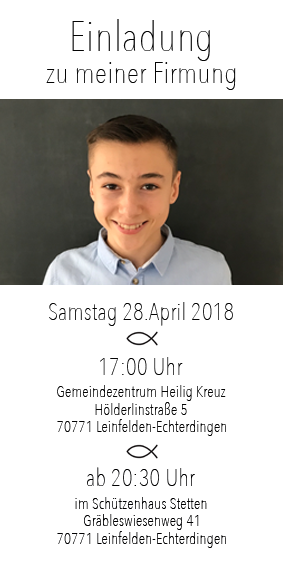
<style>
.page{position:relative;width:283px;height:581px;background:#ffffff}
.page>*{position:absolute;margin:0}
.t1{font:42px "AvenirNextCondensed-UltraLight";letter-spacing:0.015em;color:#040404}
.t2{font:30px "AvenirNextCondensed-UltraLight";letter-spacing:0.015em;color:#040404}
.t3{font:24px "AvenirNextCondensed-UltraLight";letter-spacing:0.015em;color:#040404}
.t4{font:16px "AvenirNextCondensed-UltraLight";letter-spacing:0.015em;color:#040404}
.t5{font:24px "AvenirNextCondensed-UltraLight";letter-spacing:0.015em;color:#000001}
.t6{font:16px "AvenirNextCondensed-UltraLight";letter-spacing:0.015em;color:#000001}
</style>
<div class="page">
<p class="t1" style="left:72px;top:19px;width:138px;height:42px">Einladung</p>
<p class="t2" style="left:46px;top:62px;width:190px;height:28px">zu meiner Firmung</p>
<p class="t3" style="left:49px;top:302px;width:184px;height:24px">Samstag 28.April 2018</p>
<p class="t3" style="left:100px;top:357px;width:83px;height:18px">17:00 Uhr</p>
<p class="t4" style="left:57px;top:385px;width:169px;height:16px">Gemeindezentrum Heilig Kreuz</p>
<p class="t4" style="left:95px;top:402px;width:92px;height:13px">Hölderlinstraße 5</p>
<p class="t4" style="left:57px;top:419px;width:169px;height:17px">70771 Leinfelden-Echterdingen</p>
<p class="t5" style="left:87px;top:467px;width:108px;height:19px">ab 20:30 Uhr</p>
<p class="t6" style="left:75px;top:497px;width:132px;height:12px">im Schützenhaus Stetten</p>
<p class="t6" style="left:84px;top:514px;width:115px;height:16px">Gräbleswiesenweg 41</p>
<p class="t6" style="left:57px;top:531px;width:169px;height:17px">70771 Leinfelden-Echterdingen</p>
</div>
